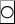
<style>
.page{position:relative;width:15px;height:24px;background:#ffffff}
.page>*{position:absolute;margin:0}
.t1{font:18px "CutC";color:#000000}
</style>
<div class="page">
<p class="t1" style="left:1px;top:6px;width:13px;height:13px">O</p>
</div>
